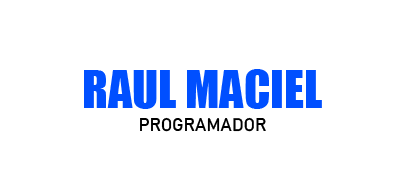
<style>
.page{position:relative;width:405px;height:178px;background:#ffffff}
.page>*{position:absolute;margin:0}
.t1{font:48px "Impact";color:#004fff}
.t2{font:18px "Bahnschrift";color:#000000}
</style>
<div class="page">
<p class="t1" style="left:84px;top:69px;width:238px;height:40px">RAUL MACIEL</p>
<p class="t2" style="left:140px;top:117px;width:126px;height:15px">PROGRAMADOR</p>
</div>
